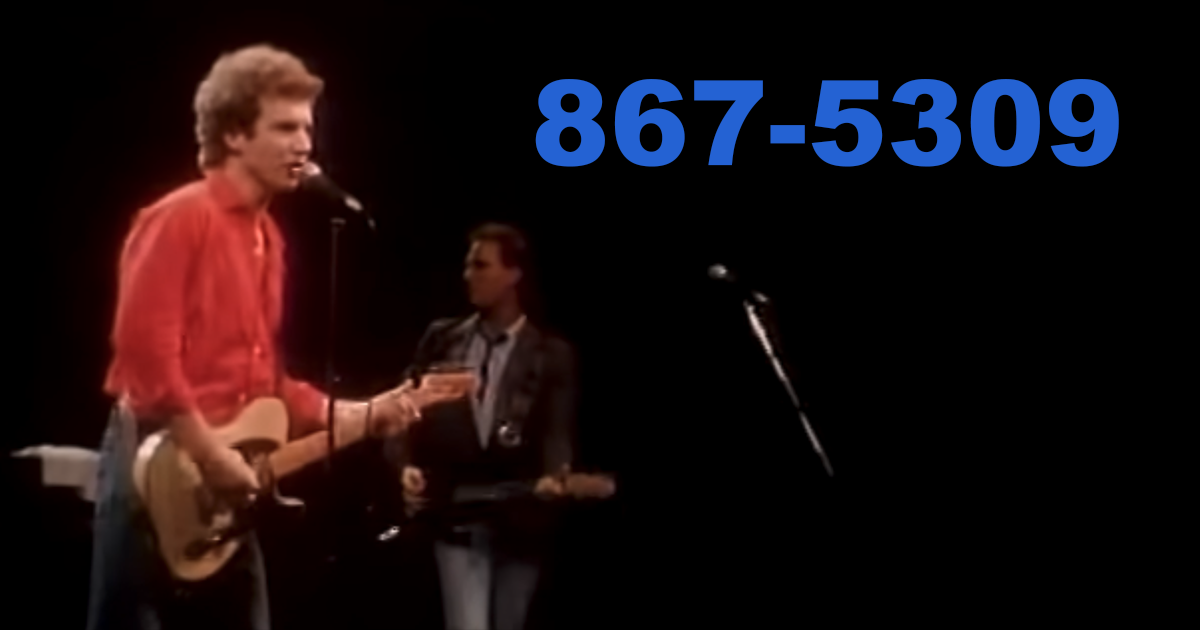
<style>
.page{position:relative;width:1200px;height:630px;background:#000000}
.page>*{position:absolute;margin:0}
.t1{font:118.4px "Arial-Black";color:#2462d3}
</style>
<div class="page">
<p class="t1" style="left:535px;top:79px;width:584px;height:88px">867-5309</p>
</div>
